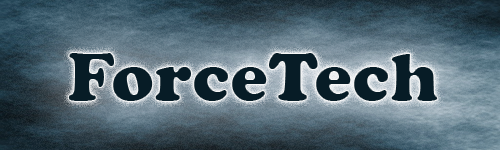
<style>
.page{position:relative;width:500px;height:150px}
.page>*{position:absolute;margin:0}
.t1{font:72px "CooperBlack";color:#071c26}
</style>
<div class="page">
<p class="t1" style="left:67px;top:52px;width:372px;height:50px">ForceTech</p>
</div>
